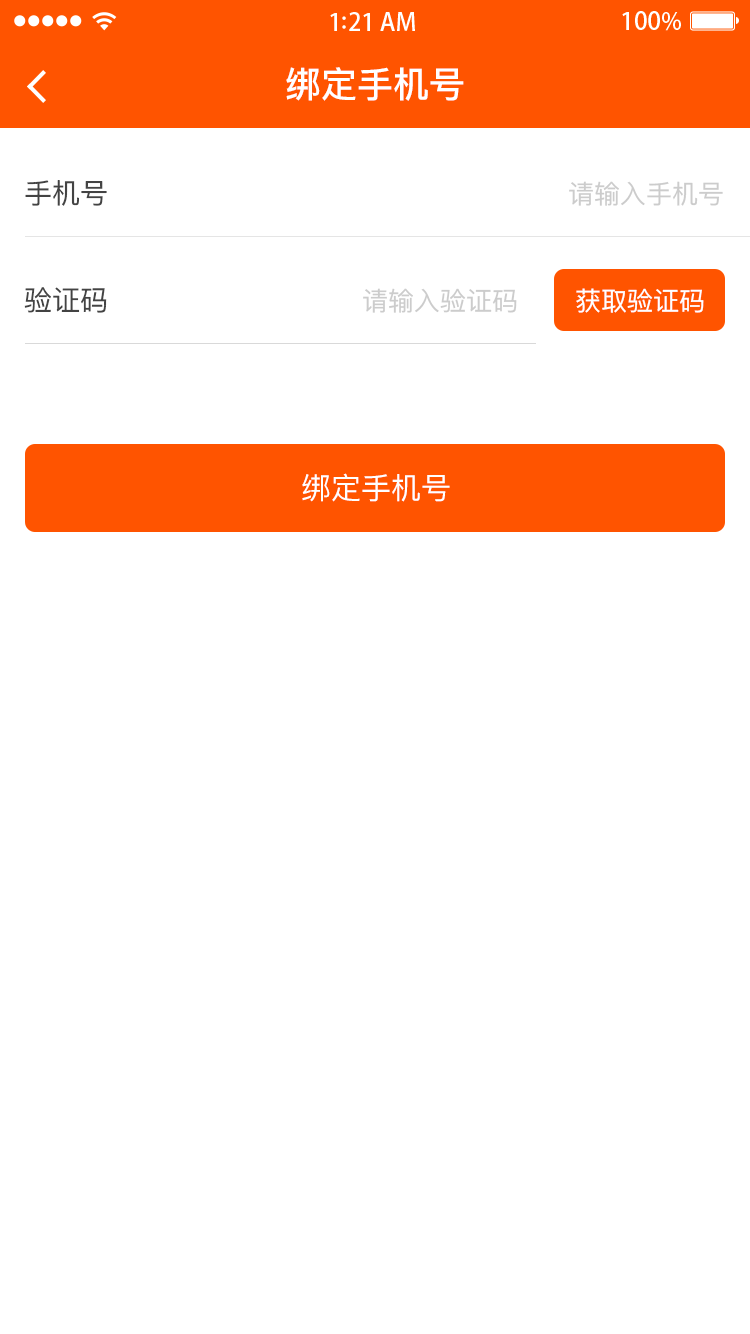
<style>
.page{position:relative;width:750px;height:1334px;background:#ffffff}
.page>*{position:absolute;margin:0}
.t1{font:36px "PingFangSC-Medium";color:#ffffff}
.t2{font:28px "PingFangSC-Regular";color:#434343}
.t3{font:26px "PingFangSC-Regular";color:#cccccc}
.t4{font:26px "PingFangSC-Regular";color:#ffffff}
.t5{font:30px "PingFangSC-Regular";color:#ffffff;text-transform:uppercase}
</style>
<div class="page">
<p class="t1" style="left:286px;top:67px;width:178px;height:34px">绑定手机号</p>
<p class="t2" style="left:25px;top:180px;width:82px;height:26px">手机号</p>
<p class="t3" style="left:569px;top:181px;width:154px;height:25px">请输入手机号</p>
<p class="t2" style="left:24px;top:287px;width:83px;height:26px">验证码</p>
<p class="t3" style="left:363px;top:288px;width:154px;height:25px">请输入验证码</p>
<p class="t4" style="left:576px;top:288px;width:128px;height:25px">获取验证码</p>
<p class="t5" style="left:302px;top:473px;width:148px;height:29px">绑定手机号</p>
</div>
